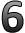
<style>
.page{position:relative;width:25px;height:33px;background:#ffffff}
.page>*{position:absolute;margin:0}
.t1{font:45.6px "Calibri";letter-spacing:0.075em;font-weight:bold}
</style>
<div class="page">
<p class="t1" style="left:2px;top:1px;width:21px;height:31px">6</p>
</div>
